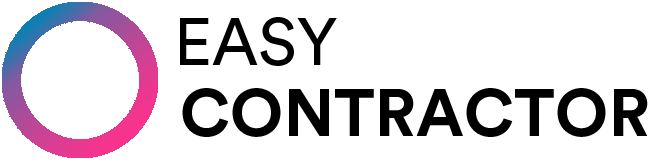
<style>
.page{position:relative;width:660px;height:160px;background:#ffffff}
.page>*{position:absolute;margin:0}
.t1{font:66px "CircularStd-Book";color:#000000}
.t2{font:66px "CircularStd-Bold";color:#000000}
</style>
<div class="page">
<p class="t1" style="left:180px;top:17px;width:157px;height:49px">EASY</p>
<p class="t2" style="left:182px;top:88px;width:466px;height:49px">CONTRACTOR</p>
</div>
